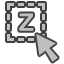
<style>
.page{position:relative;width:64px;height:64px;background:#ffffff}
.page>*{position:absolute;margin:0}
.t1{font:26px "EurostileBold";letter-spacing:0.025em;color:#bfbfbf}
</style>
<div class="page">
<p class="t1" style="left:19px;top:13px;width:15px;height:18px">Z</p>
</div>
